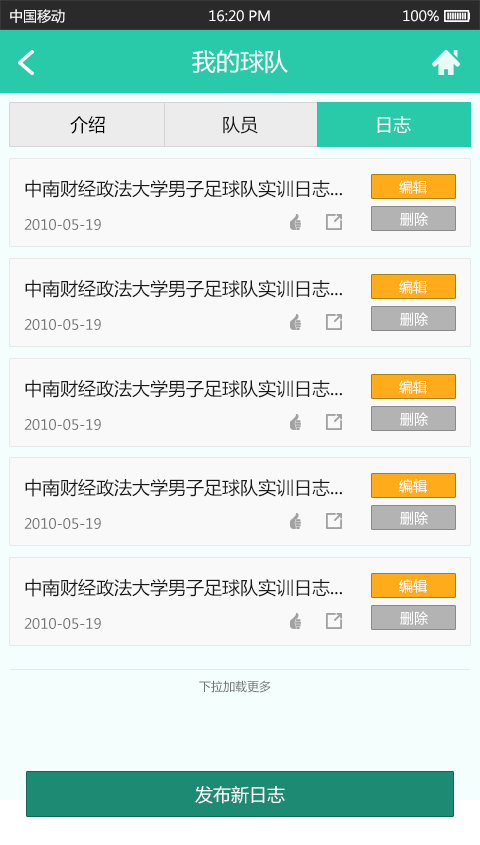
<style>
.page{position:relative;width:480px;height:845px;background:#f9f9f9}
.page>*{position:absolute;margin:0}
.t1{font:14px "MicrosoftYaHei";color:#ffffff}
.t2{font:24px "MicrosoftYaHei";color:#f4fffd}
.t3{font:18px "MicrosoftYaHei";color:#000000}
.t4{font:18px "MicrosoftYaHei";color:#191919}
.t5{font:18px "MicrosoftYaHei";color:#ffffff}
.t6{font:14px "MicrosoftYaHei";color:#737373}
.t7{font:12px "MicrosoftYaHei";color:#737373}
</style>
<div class="page">
<p class="t1" style="left:10px;top:9px;width:55px;height:14px">中国移动</p>
<p class="t1" style="left:209px;top:10px;width:61px;height:12px">16:20 PM</p>
<p class="t1" style="left:403px;top:10px;width:36px;height:12px">100%</p>
<p class="t2" style="left:192px;top:50px;width:96px;height:24px">我的球队</p>
<p class="t3" style="left:70px;top:116px;width:35px;height:18px">介绍</p>
<p class="t4" style="left:223px;top:116px;width:35px;height:18px">队员</p>
<p class="t5" style="left:377px;top:116px;width:34px;height:17px">日志</p>
<p class="t4" style="left:25px;top:179px;width:317px;height:19px">中南财经政法大学男子足球队实训日志...</p>
<p class="t1" style="left:399px;top:180px;width:28px;height:14px">编辑</p>
<p class="t6" style="left:24px;top:219px;width:77px;height:11px">2010-05-19</p>
<p class="t1" style="left:400px;top:212px;width:28px;height:14px">删除</p>
<p class="t4" style="left:25px;top:279px;width:317px;height:19px">中南财经政法大学男子足球队实训日志...</p>
<p class="t1" style="left:399px;top:280px;width:28px;height:14px">编辑</p>
<p class="t1" style="left:400px;top:312px;width:28px;height:14px">删除</p>
<p class="t6" style="left:24px;top:319px;width:77px;height:11px">2010-05-19</p>
<p class="t4" style="left:25px;top:379px;width:317px;height:19px">中南财经政法大学男子足球队实训日志...</p>
<p class="t1" style="left:399px;top:380px;width:28px;height:14px">编辑</p>
<p class="t1" style="left:400px;top:412px;width:28px;height:14px">删除</p>
<p class="t6" style="left:24px;top:419px;width:77px;height:11px">2010-05-19</p>
<p class="t4" style="left:25px;top:478px;width:317px;height:19px">中南财经政法大学男子足球队实训日志...</p>
<p class="t1" style="left:399px;top:479px;width:28px;height:14px">编辑</p>
<p class="t6" style="left:24px;top:518px;width:77px;height:11px">2010-05-19</p>
<p class="t1" style="left:400px;top:511px;width:28px;height:14px">删除</p>
<p class="t4" style="left:25px;top:578px;width:317px;height:19px">中南财经政法大学男子足球队实训日志...</p>
<p class="t1" style="left:399px;top:579px;width:28px;height:14px">编辑</p>
<p class="t1" style="left:400px;top:611px;width:28px;height:14px">删除</p>
<p class="t6" style="left:24px;top:618px;width:77px;height:11px">2010-05-19</p>
<p class="t7" style="left:199px;top:680px;width:72px;height:13px">下拉加载更多</p>
<p class="t5" style="left:195px;top:786px;width:90px;height:18px">发布新日志</p>
</div>
